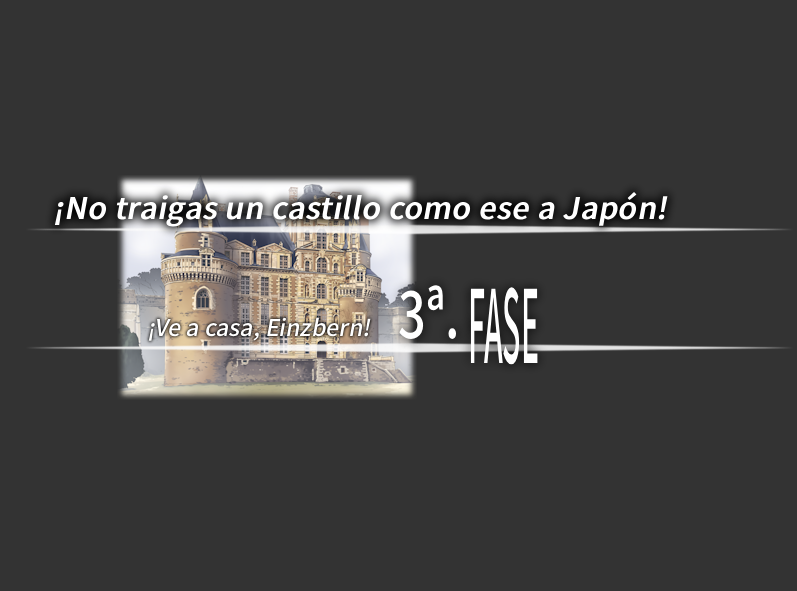
<style>
.page{position:relative;width:797px;height:591px;background:#333333}
.page>*{position:absolute;margin:0}
.t1{font:30px "NotoSansJP-Medium";color:#ffffff;font-weight:bold;font-style:italic}
.t2{font:65px "NotoSansJP-Medium";color:#ffffff;scale:0.75 1}
.t3{font:101px "NotoSansJP-Medium_479.000wght";color:#ffffff;scale:0.3 1}
.t4{font:23px "NotoSansJP-Medium";color:#ffffff;font-style:italic}
</style>
<div class="page">
<p class="t1" style="left:54px;top:192px;width:614px;height:35px">¡No traigas un castillo como ese a Japón!</p>
<p class="t2" style="left:399px;top:285px;width:58px;height:54px">3ª.</p>
<p class="t3" style="left:470px;top:287px;width:68px;height:78px">FASE</p>
<p class="t4" style="left:148px;top:317px;width:223px;height:24px">¡Ve a casa, Einzbern!</p>
</div>
